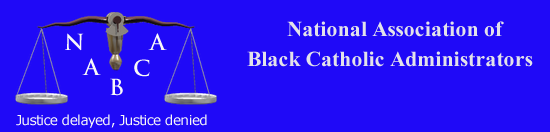
<style>
.page{position:relative;width:550px;height:132px;background:#1f09f7}
.page>*{position:absolute;margin:0}
.t1{font:27.7px "Kokila-Bold";letter-spacing:0.005em;color:#e3e2ea}
.t2{font:21.7px "TrajanPro-Bold";letter-spacing:-0.05em;color:#f9f9f8}
.t3{font:13.8px "Verdana";letter-spacing:-0.05em;color:#f9f9f8}
</style>
<div class="page">
<p class="t1" style="left:287px;top:21px;width:217px;height:16px">National Association of</p>
<p class="t2" style="left:65px;top:33px;width:19px;height:18px">N</p>
<p class="t2" style="left:148px;top:33px;width:19px;height:17px">A</p>
<p class="t1" style="left:247px;top:51px;width:286px;height:16px">Black Catholic Administrators</p>
<p class="t2" style="left:82px;top:58px;width:19px;height:17px">A</p>
<p class="t2" style="left:134px;top:59px;width:16px;height:18px">C</p>
<p class="t2" style="left:110px;top:78px;width:13px;height:18px">B</p>
<p class="t3" style="left:16px;top:114px;width:191px;height:14px">Justice delayed, Justice denied</p>
</div>
